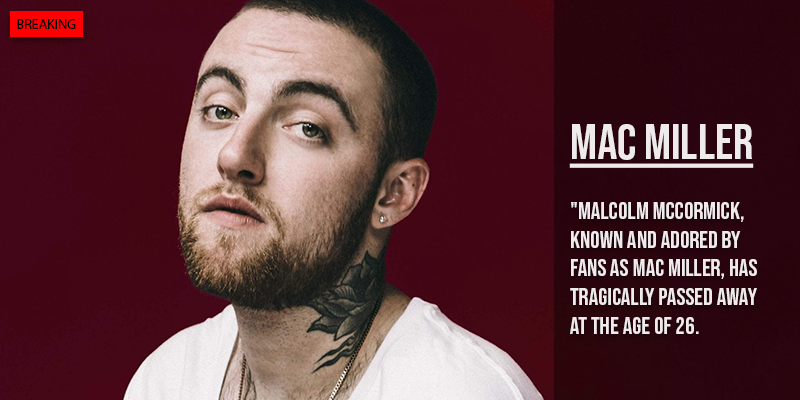
<style>
.page{position:relative;width:800px;height:400px}
.page>*{position:absolute;margin:0}
.t1{font:14px "MyriadPro-Regular";color:#000000}
.t2{font:50px "BebasNeue-Regular";color:#efebec;text-decoration:underline}
.t3{font:24px "BebasNeue-Regular";color:#efebec}
</style>
<div class="page">
<p class="t1" style="left:17px;top:19px;width:59px;height:10px">BREAKING</p>
<p class="t2" style="left:569px;top:124px;width:185px;height:44px">Mac Miller</p>
<p class="t3" style="left:570px;top:202px;width:187px;height:132px">"Malcolm McCormick, known and adored by fans as Mac Miller, has tragically passed away at the age of 26.</p>
</div>
